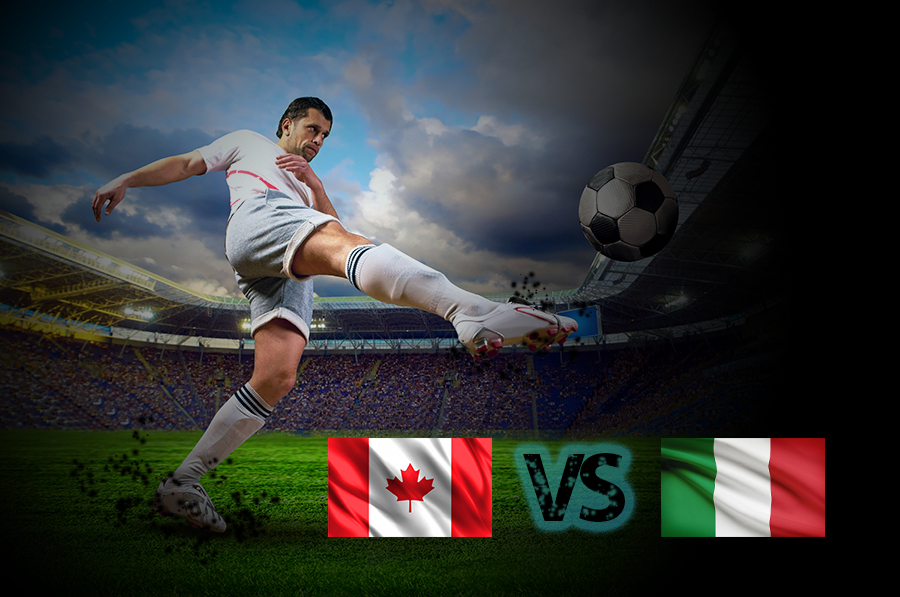
<style>
.page{position:relative;width:900px;height:597px}
.page>*{position:absolute;margin:0}
.t1{font:100px "MyriadPro-Bold";letter-spacing:-0.1em;color:#000000}
</style>
<div class="page">
<p class="t1" style="left:523px;top:453px;width:102px;height:69px">VS</p>
</div>
